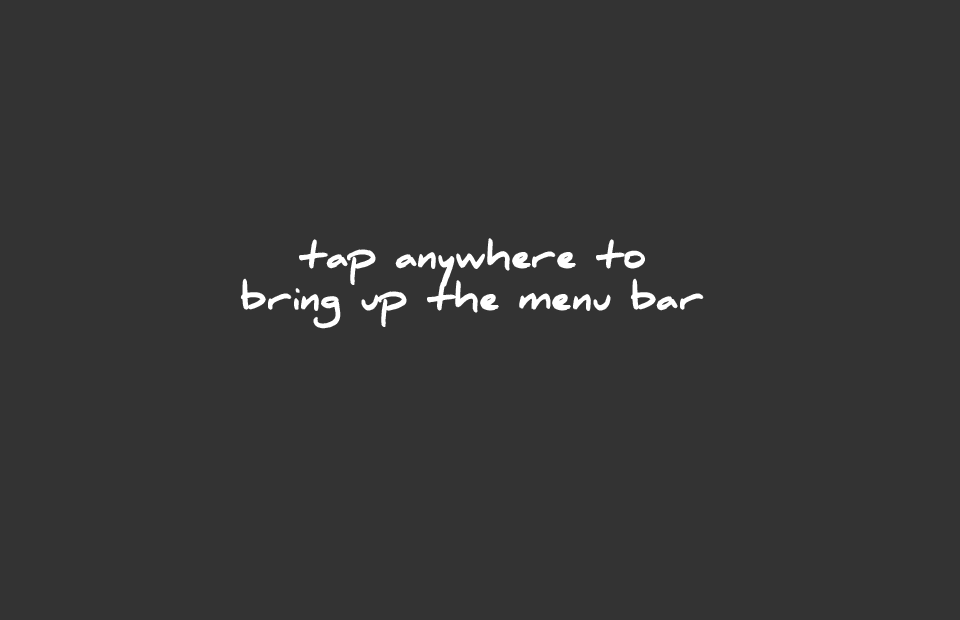
<style>
.page{position:relative;width:960px;height:620px;background:#333333}
.page>*{position:absolute;margin:0}
.t1{font:35px "DanielBlack";color:#ffffff}
</style>
<div class="page">
<p class="t1" style="left:240px;top:238px;width:464px;height:91px;text-align:center">tap anywhere to <br>bring up the menu bar</p>
</div>
